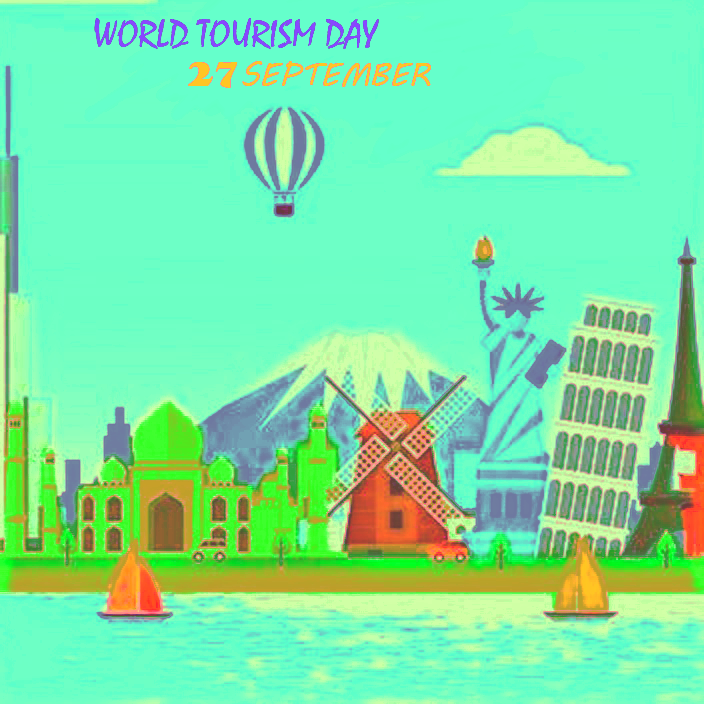
<style>
.page{position:relative;width:704px;height:704px}
.page>*{position:absolute;margin:0}
.t1{font:40px "Mistral"}
.t2{font:32px "GoudyStout"}
.t3{font:32px "MVBoli"}
</style>
<div class="page">
<p class="t1" style="left:94px;top:18px;width:337px;height:70px">WORLD TOURISM DAY<br>        <span class="t2">27</span><span class="t3">SEPTEMBER<br></span><br><br><br>2</p>
</div>
